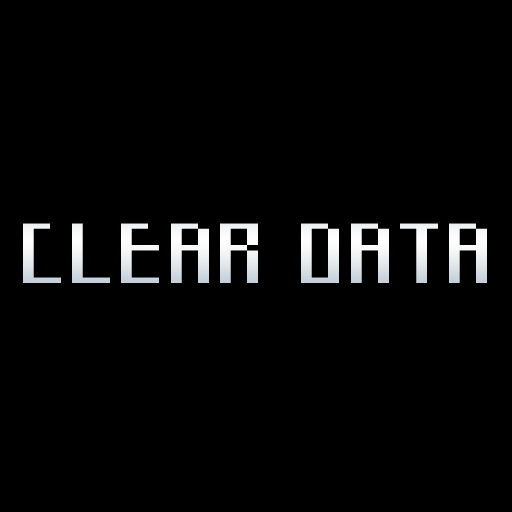
<style>
.page{position:relative;width:512px;height:512px;background:#000000}
.page>*{position:absolute;margin:0}
.t1{font:79.2px "Starcadia";color:#fffefe}
</style>
<div class="page">
<p class="t1" style="left:23px;top:223px;width:464px;height:60px">CLEAR DATA</p>
</div>
